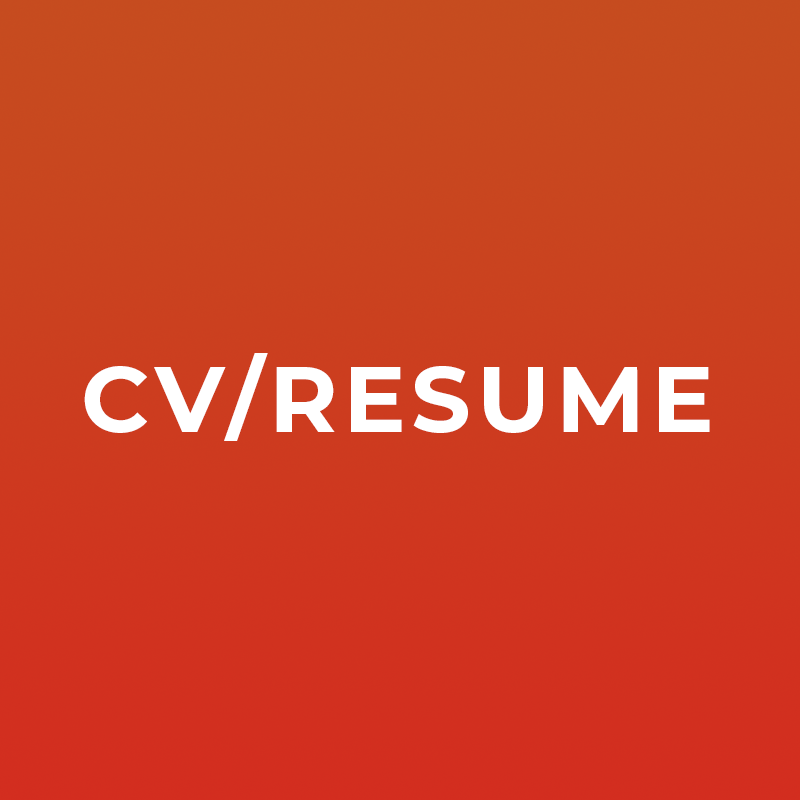
<style>
.page{position:relative;width:800px;height:800px}
.page>*{position:absolute;margin:0}
.t1{font:93.4px "Montserrat-Bold";letter-spacing:0.06em;color:#ffffff}
</style>
<div class="page">
<p class="t1" style="left:84px;top:353px;width:626px;height:88px">CV/RESUME</p>
</div>
